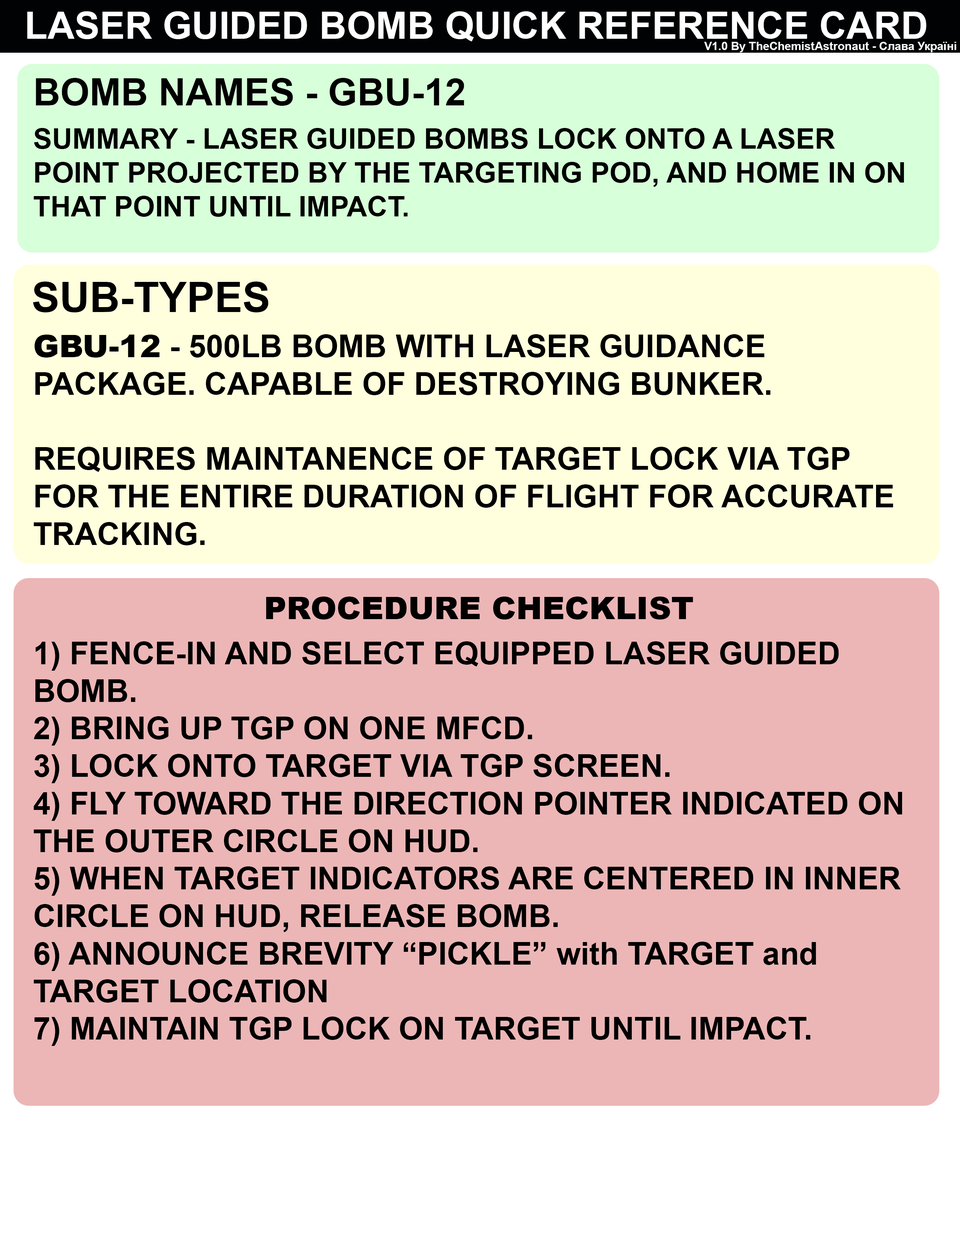
<style>
.page{position:relative;width:960px;height:1242px;background:#ecb6b6}
.page>*{position:absolute;margin:0}
.t1{font:37.6px "Arial-BoldMT";color:#ffffff}
.t2{font:11.5px "Arial-BoldMT";color:#ffffff}
.t3{font:37.6px "Arial-BoldMT";color:#000000}
.t4{font:28.2px "Arial-BoldMT";color:#000000}
.t5{font:41.7px "Arial-BoldMT";color:#000000}
.t6{font:31.3px "Arial-BoldMT";color:#000000}
.t7{font:31.3px "Arial-Black";color:#000000}
.t8{font:31.4px "Arial-Black";color:#000000}
</style>
<div class="page">
<p class="t1" style="left:27px;top:11px;width:899px;height:30px">LASER GUIDED BOMB QUICK REFERENCE CARD CARD</p>
<p class="t2" style="left:704px;top:42px;width:252px;height:10px">V1.0 By TheChemistAstronaut - Слава Україні</p>
<p class="t3" style="left:36px;top:78px;width:428px;height:28px">BOMB NAMES - GBU-12</p>
<p class="t4" style="left:34px;top:128px;width:870px;height:89px">SUMMARY - LASER GUIDED BOMBS LOCK ONTO A LASER POINT PROJECTED BY THE TARGETING POD, AND HOME IN ON THAT POINT UNTIL IMPACT.</p>
<p class="t5" style="left:33px;top:282px;width:235px;height:30px">SUB-TYPES</p>
<p class="t6" style="left:34px;top:334px;width:859px;height:211px"><span class="t7">GBU-12</span> - 500LB BOMB WITH LASER GUIDANCE PACKAGE. CAPABLE OF DESTROYING BUNKER.<br><br>REQUIRES MAINTANENCE OF TARGET LOCK VIA TGP FOR THE ENTIRE DURATION OF FLIGHT FOR ACCURATE TRACKING.</p>
<p class="t8" style="left:266px;top:597px;width:427px;height:23px">PROCEDURE CHECKLIST</p>
<p class="t6" style="left:34px;top:641px;width:868px;height:405px">1) FENCE-IN AND SELECT EQUIPPED LASER GUIDED BOMB.<br>2) BRING UP TGP ON ONE MFCD.<br>3) LOCK ONTO TARGET VIA TGP SCREEN.<br>4) FLY TOWARD THE DIRECTION POINTER INDICATED ON THE OUTER CIRCLE ON HUD.<br>5) WHEN TARGET INDICATORS ARE CENTERED IN INNER CIRCLE ON HUD, RELEASE BOMB.<br>6) ANNOUNCE BREVITY “PICKLE” with TARGET and TARGET LOCATION<br>7) MAINTAIN TGP LOCK ON TARGET UNTIL IMPACT.</p>
</div>
